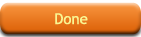
<style>
.page{position:relative;width:141px;height:37px}
.page>*{position:absolute;margin:0}
.t1{font:15px "TrebuchetMS";color:#f9f592}
</style>
<div class="page">
<p class="t1" style="left:55px;top:13px;width:33px;height:12px">Done</p>
</div>
